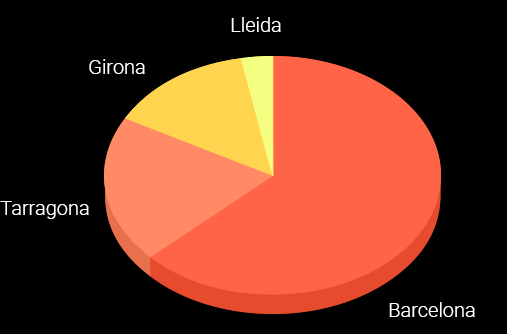
<style>
.page{position:relative;width:507px;height:334px;background:#000000}
.page>*{position:absolute;margin:0}
.t1{font:20px "Roboto-Light";color:#ffffff}
</style>
<div class="page">
<p class="t1" style="left:231px;top:17px;width:50px;height:15px">Lleida</p>
<p class="t1" style="left:89px;top:59px;width:56px;height:15px">Girona</p>
<p class="t1" style="left:0px;top:201px;width:89px;height:18px">Tarragona</p>
<p class="t1" style="left:389px;top:302px;width:86px;height:15px">Barcelona</p>
</div>
